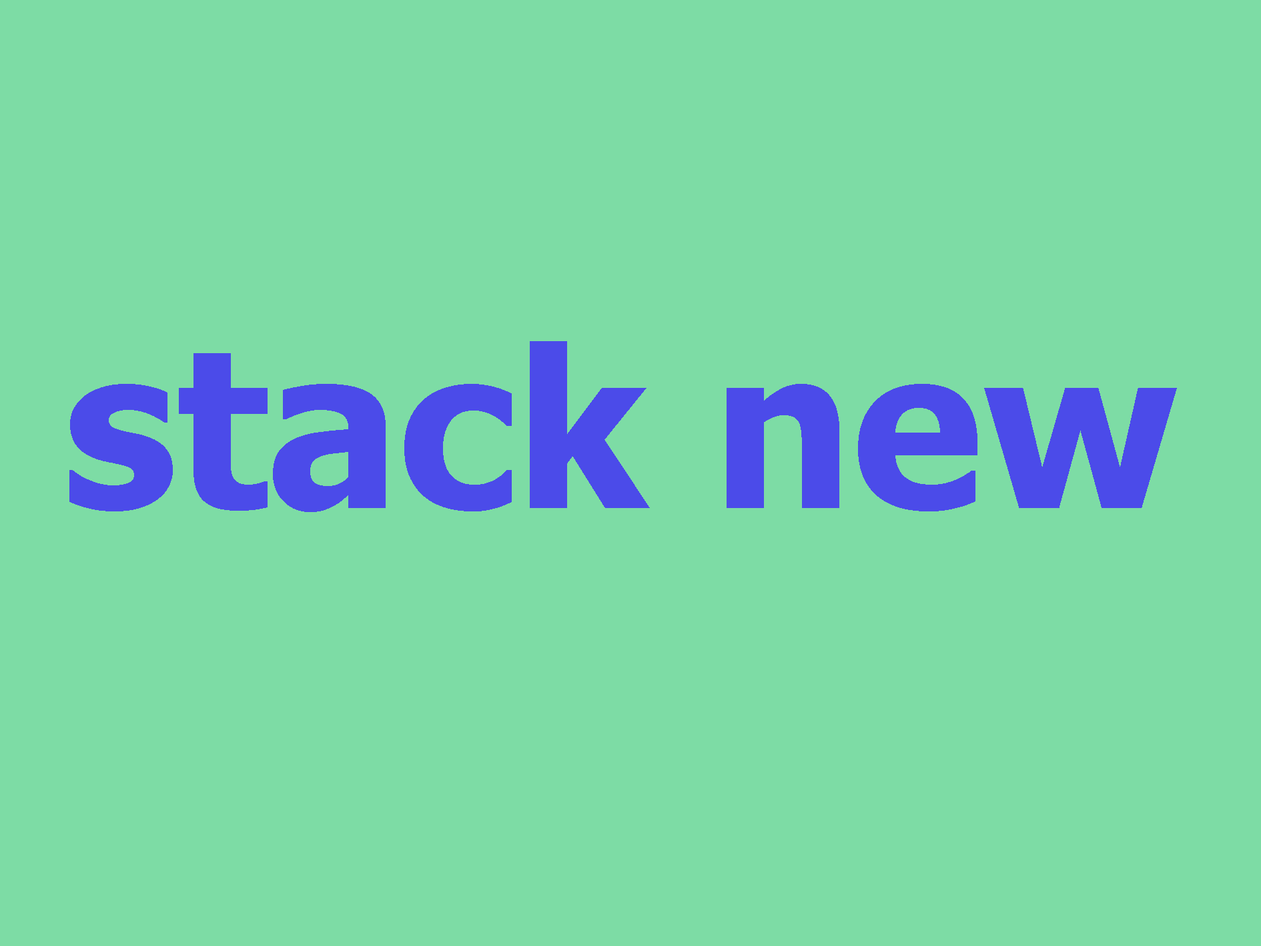
<style>
.page{position:relative;width:1261px;height:946px;background:#7ddca5}
.page>*{position:absolute;margin:0}
.t1{font:219.7px "Tahoma-Bold";color:#4b4be9}
</style>
<div class="page">
<p class="t1" style="left:69px;top:341px;width:1108px;height:171px">stack new</p>
</div>
